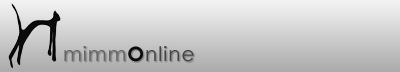
<style>
.page{position:relative;width:400px;height:72px}
.page>*{position:absolute;margin:0}
.t1{font:20px "CenturyGothic";letter-spacing:0.05em;color:#444444}
.t2{font:20px "CenturyGothic";letter-spacing:0.05em;color:#666666}
.t3{font:20px "CenturyGothic-Bold";letter-spacing:0.05em;color:#0b0b0b}
</style>
<div class="page">
<p class="t1" style="left:64px;top:46px;width:130px;height:16px"><span class="t2">mimm</span><span class="t3">O</span>nline</p>
</div>
